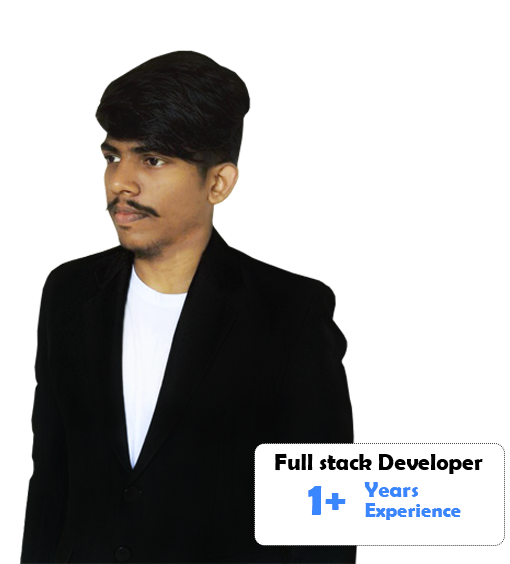
<style>
.page{position:relative;width:510px;height:564px;background:#ffffff}
.page>*{position:absolute;margin:0}
.t1{font:22.9px "BerlinSansFBDemi-Bold";color:#000000}
.t2{font:49.2px "BerlinSansFBDemi-Bold";color:#3a86ff}
.t3{font:21.5px "BerlinSansFBDemi-Bold";color:#3a86ff}
.t4{font:36.1px "BerlinSansFBDemi-Bold";color:#3a86ff;scale:1.27 1}
.t5{font:19.9px "BerlinSansFBDemi-Bold";color:#3a86ff}
</style>
<div class="page">
<p class="t1" style="left:275px;top:453px;width:208px;height:21px">Full stack Developer</p>
<p class="t2" style="left:308px;top:486px;width:14px;height:29px">1</p>
<p class="t3" style="left:364px;top:482px;width:55px;height:15px">Years</p>
<p class="t4" style="left:325px;top:493px;width:21px;height:17px">+</p>
<p class="t5" style="left:365px;top:503px;width:96px;height:17px">Experience</p>
</div>
